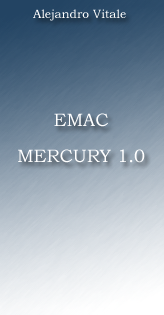
<style>
.page{position:relative;width:164px;height:315px}
.page>*{position:absolute;margin:0}
.t1{font:12px "BookmanOldStyle";color:#ffffff}
.t2{font:18px "BookmanOldStyle";color:#ffffff}
</style>
<div class="page">
<p class="t1" style="left:33px;top:9px;width:93px;height:12px">Alejandro Vitale</p>
<p class="t2" style="left:18px;top:113px;width:127px;height:50px;text-align:center">EMAC<br><br>MERCURY 1.0</p>
</div>
